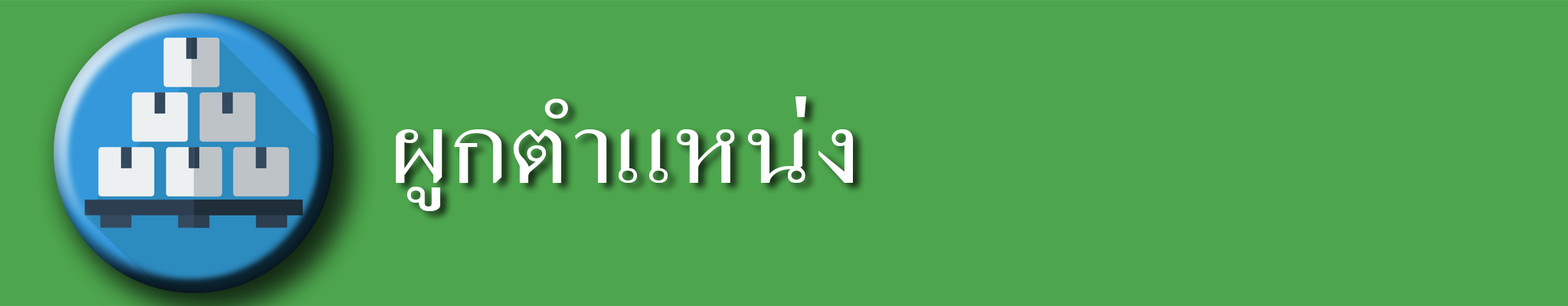
<style>
.page{position:relative;width:1568px;height:306px;background:#4da64d}
.page>*{position:absolute;margin:0}
.t1{font:133.7px "AngsanaNew";color:#ffffff;scale:1.14 1}
</style>
<div class="page">
<p class="t1" style="left:396px;top:96px;width:457px;height:115px">ผูกตำแหน่ง</p>
</div>
